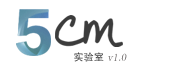
<style>
.page{position:relative;width:182px;height:66px;background:#ffffff}
.page>*{position:absolute;margin:0}
.t1{font:10px "ç»å¸ä¸­å®ç¹-regular";letter-spacing:0.02em;color:#706c6c;font-style:italic}
.t2{font:10px "SimHei";letter-spacing:0.02em;color:#3c3c3c}
</style>
<div class="page">
<p class="t1" style="left:74px;top:52px;width:53px;height:10px"><span class="t2">实验室 </span>v1.0</p>
</div>
